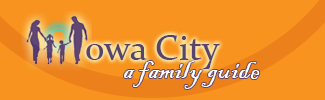
<style>
.page{position:relative;width:325px;height:100px;background:#f7931e}
.page>*{position:absolute;margin:0}
.t1{font:36px "Constantia";color:#59426c}
.t2{font:30px "BlackadderITC-Regular";color:#ffffff}
</style>
<div class="page">
<p class="t1" style="left:86px;top:35px;width:134px;height:34px">owa City</p>
<p class="t2" style="left:123px;top:61px;width:137px;height:28px">a family guide</p>
</div>
